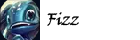
<style>
.page{position:relative;width:140px;height:40px;background:#ffffff}
.page>*{position:absolute;margin:0}
.t1{font:12px "VinerHandITC";color:#000000}
</style>
<div class="page">
<p class="t1" style="left:47px;top:12px;width:32px;height:14px">Fizz</p>
</div>
